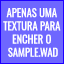
<style>
.page{position:relative;width:64px;height:64px;background:#6e67ff}
.page>*{position:absolute;margin:0}
.t1{font:11px "Oswald-Regular";color:#fffffe;text-transform:uppercase;scale:0.96 1}
</style>
<div class="page">
<p class="t1" style="left:3px;top:8px;width:58px;height:49px;text-align:center">apenas uma <br>textura para <br>encher o <br>sample.wad</p>
</div>
